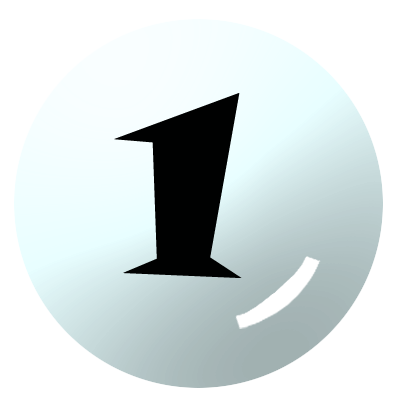
<style>
.page{position:relative;width:400px;height:400px;background:#ffffff}
.page>*{position:absolute;margin:0}
.t1{font:250px "SnapITC-Regular";color:#000101}
</style>
<div class="page">
<p class="t1" style="left:114px;top:93px;width:128px;height:185px">1</p>
</div>
